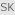
<style>
.page{position:relative;width:15px;height:15px;background:#e6e6e6}
.page>*{position:absolute;margin:0}
.t1{font:10.6px "Meiryo";color:#595959}
</style>
<div class="page">
<p class="t1" style="left:1px;top:3px;width:14px;height:8px">SK</p>
</div>
